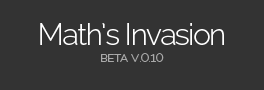
<style>
.page{position:relative;width:264px;height:90px;background:#333333}
.page>*{position:absolute;margin:0}
.t1{font:30px "Raleway-Light";letter-spacing:-0.048em;color:#ffffff}
.t2{font:14px "Raleway-Light";letter-spacing:-0.048em;color:#a9a9a9;font-variant:small-caps}
</style>
<div class="page">
<p class="t1" style="left:40px;top:23px;width:184px;height:22px">Math’s Invasion</p>
<p class="t2" style="left:101px;top:53px;width:63px;height:9px">beta v.0.10</p>
</div>
